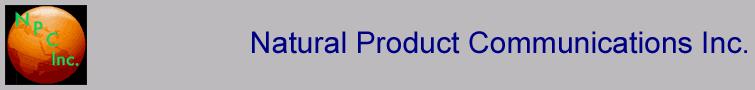
<style>
.page{position:relative;width:755px;height:90px;background:#bdbabd}
.page>*{position:absolute;margin:0}
.t1{font:30px "ArialMT";color:#000084}
</style>
<div class="page">
<p class="t1" style="left:252px;top:31px;width:495px;height:23px">Natural Product Communications Inc.</p>
</div>
